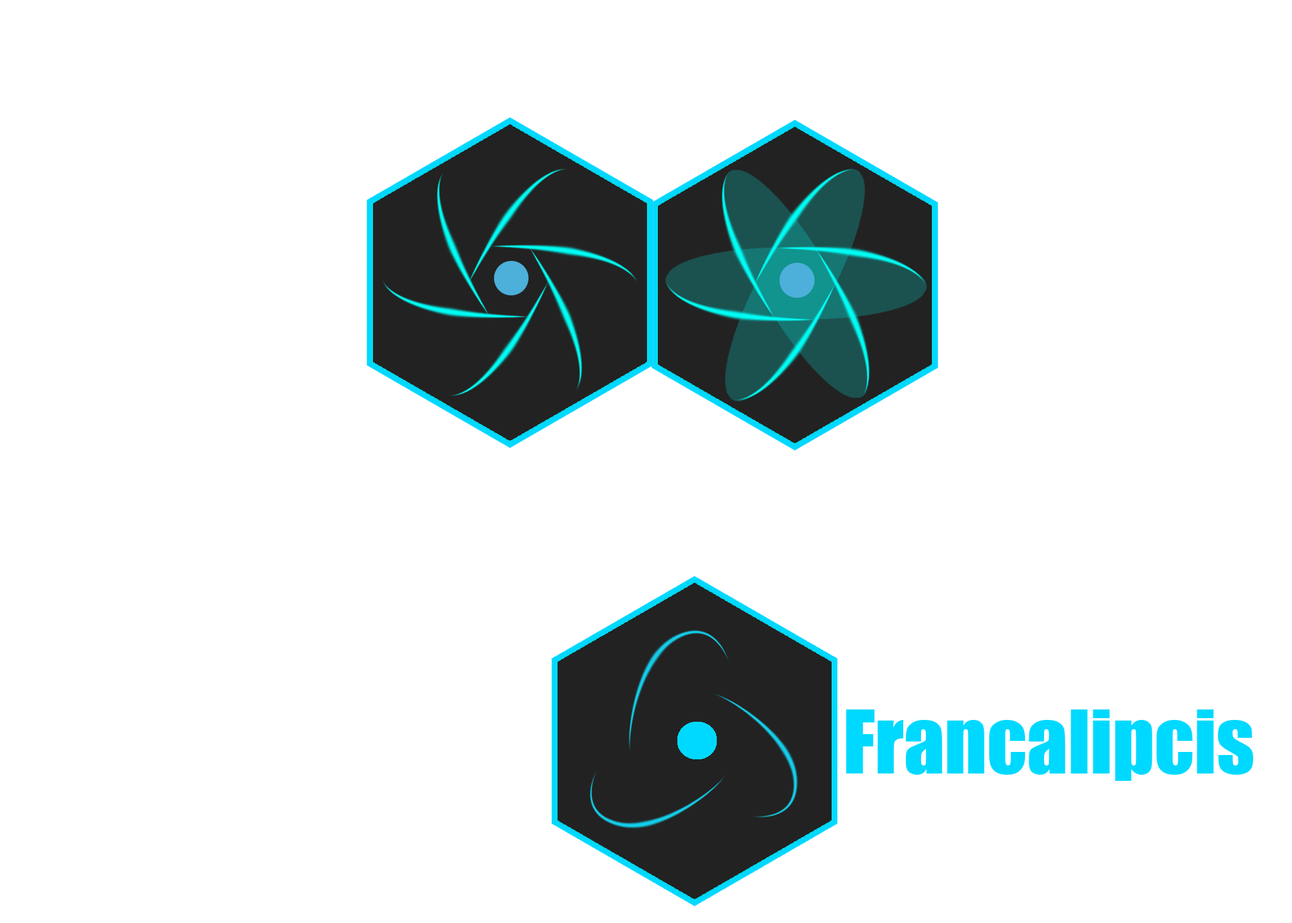
<style>
.page{position:relative;width:1292px;height:923px;background:#ffffff}
.page>*{position:absolute;margin:0}
.t1{font:81px "Impact";color:#00d9ff}
</style>
<div class="page">
<p class="t1" style="left:846px;top:709px;width:407px;height:72px">Francalipcis</p>
</div>
